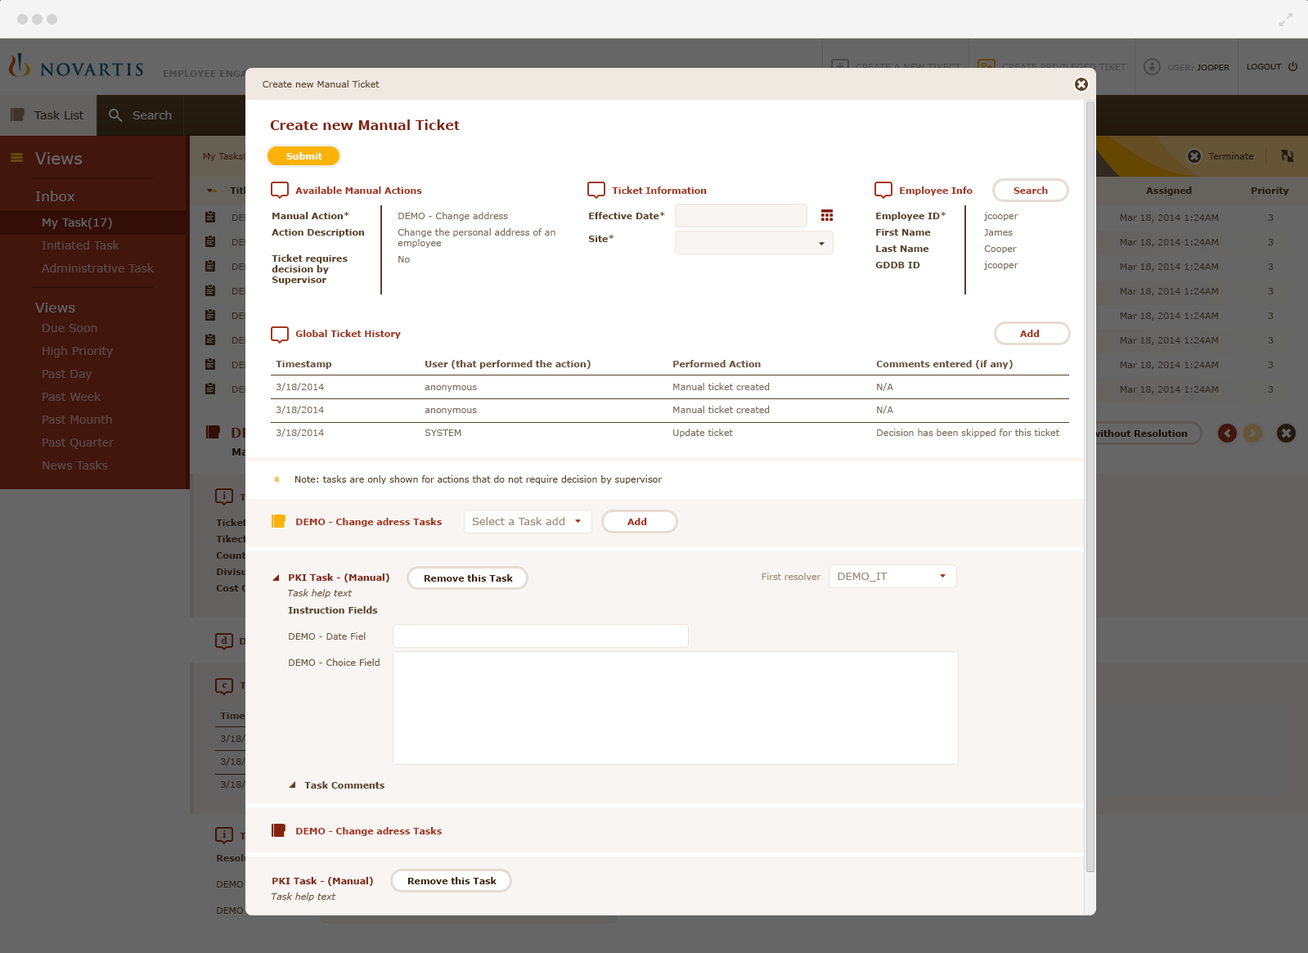
<style>
.page{position:relative;width:1308px;height:953px;background:#ffffff}
.page>*{position:absolute;margin:0}
.t1{font:9px "Verdana";color:#594128}
.t2{font:13.1px "Verdana-Bold";color:#80230f}
.t3{font:9px "Verdana-Bold";color:#ffffff}
.t4{font:9px "Verdana-Bold";color:#a23720}
.t5{font:9px/16.4px "Verdana-Bold";color:#594128}
.t6{font:9px "Verdana-Bold";color:#594128}
.t7{font:9px/16.4px "Verdana";color:#7a6b5b}
.t8{font:9px "Verdana";color:#7a6b5b}
.t9{font:9px/22.9px "Verdana-Bold";color:#594128}
.t10{font:9px/22.9px "Verdana";color:#7a6b5b}
.t11{font:9px/22.9px "Verdana-Bold";color:#6a533b}
.t12{font:10.6px "Verdana";color:#9c8775}
.t13{font:9px "Verdana-Bold";color:#80230f}
.t14{font:9px "Verdana-Bold";color:#3c2710}
.t15{font:9px "Verdana";color:#9c8775}
.t16{font:9px "Verdana-Italic";color:#6a533b}
.t17{font:9px/26.2px "Verdana";color:#6a533b}
.t18{font:9px/26.2px "Verdana-Bold";color:#6a533b}
</style>
<div class="page">
<p class="t1" style="left:263px;top:80px;width:117px;height:8px">Create new Manual Ticket</p>
<p class="t1" style="left:263px;top:80px;width:117px;height:8px">Create new Manual Ticket</p>
<p class="t2" style="left:270px;top:119px;width:190px;height:11px">Create new Manual Ticket</p>
<p class="t3" style="left:286px;top:152px;width:36px;height:8px">Submit</p>
<p class="t4" style="left:295px;top:187px;width:127px;height:7px">Available Manual Actions</p>
<p class="t4" style="left:612px;top:187px;width:95px;height:7px">Ticket Information</p>
<p class="t4" style="left:900px;top:187px;width:73px;height:9px">Employee Info</p>
<p class="t4" style="left:1014px;top:187px;width:34px;height:7px">Search</p>
<p class="t5" style="left:272px;top:212px;width:93px;height:73px">Manual Action*<br>Action Description<br>Ticket requires<br><span class="t6">decision by<br>Supervisor</span></p>
<p class="t7" style="left:398px;top:212px;width:158px;height:51px">DEMO - Change address<br>Change the personal address of an<br><span class="t8">employee<br></span>No</p>
<p class="t5" style="left:588px;top:212px;width:77px;height:30px">Effective Date*<br><span class="t9">Site*</span></p>
<p class="t5" style="left:875px;top:212px;width:71px;height:56px">Employee ID*<br>First Name<br>Last Name<br>GDDB ID</p>
<p class="t7" style="left:983px;top:212px;width:36px;height:58px">jcooper<br>James<br>Cooper<br>jcooper</p>
<p class="t4" style="left:295px;top:330px;width:106px;height:9px">Global Ticket History</p>
<p class="t4" style="left:1020px;top:330px;width:20px;height:7px">Add</p>
<p class="t10" style="left:276px;top:361px;width:56px;height:76px"><span class="t11">Timestamp<br></span>3/18/2014<br>3/18/2014<br>3/18/2014</p>
<p class="t11" style="left:425px;top:360px;width:166px;height:76px">User (that performed the action)<br><span class="t10">anonymous<br>anonymous<br>SYSTEM</span></p>
<p class="t10" style="left:673px;top:360px;width:97px;height:78px"><span class="t11">Performed Action<br></span>Manual ticket created<br>Manual ticket created<br>Update ticket</p>
<p class="t10" style="left:876px;top:360px;width:184px;height:78px"><span class="t11">Comments entered (if any)<br></span>N/A<br>N/A<br>Decision has been skipped for this ticket</p>
<p class="t1" style="left:295px;top:475px;width:368px;height:9px">Note: tasks are only shown for actions that do not require decision by supervisor</p>
<p class="t4" style="left:296px;top:518px;width:146px;height:9px">DEMO - Change adress Tasks</p>
<p class="t12" style="left:472px;top:517px;width:93px;height:8px">Select a Task add</p>
<p class="t4" style="left:628px;top:518px;width:19px;height:7px">Add</p>
<p class="t13" style="left:289px;top:574px;width:100px;height:9px">PKI Task - (Manual)</p>
<p class="t14" style="left:424px;top:574px;width:89px;height:8px">Remove this Task</p>
<p class="t15" style="left:762px;top:573px;width:59px;height:7px">First resolver</p>
<p class="t12" style="left:838px;top:573px;width:50px;height:9px">DEMO_IT</p>
<p class="t16" style="left:288px;top:589px;width:65px;height:9px">Task help text</p>
<p class="t6" style="left:288px;top:606px;width:90px;height:8px">Instruction Fields</p>
<p class="t17" style="left:289px;top:632px;width:91px;height:34px"><span class="t18"><br></span>DEMO - Date Fiel<br>DEMO - Choice Field</p>
<p class="t6" style="left:304px;top:781px;width:81px;height:8px">Task Comments</p>
<p class="t4" style="left:296px;top:827px;width:146px;height:9px">DEMO - Change adress Tasks</p>
<p class="t13" style="left:272px;top:877px;width:101px;height:9px">PKI Task - (Manual)</p>
<p class="t14" style="left:407px;top:877px;width:90px;height:7px">Remove this Task</p>
<p class="t16" style="left:272px;top:893px;width:64px;height:9px">Task help text</p>
</div>
